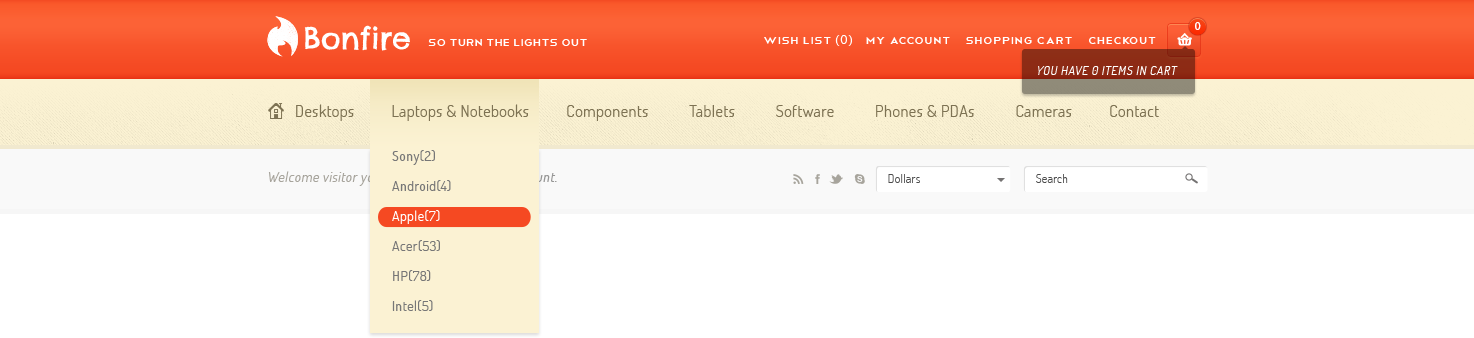
<style>
.page{position:relative;width:1474px;height:338px;background:#ffffff}
.page>*{position:absolute;margin:0}
.t1{font:30px "ChelseaMarket-Regular";color:#ffffff}
.t2{font:11px "MyriadPro-Regular";letter-spacing:0.03em;color:#ffffff}
.t3{font:14px "Telegrafico";color:#ffffff}
.t4{font:14px "Telegrafico";letter-spacing:0.03em;color:#ffffff}
.t5{font:11px "Geneva";letter-spacing:0.03em;color:#ffffff}
.t6{font:12px "TerminalDosis-Book";letter-spacing:0.05em;color:#ffffff;font-style:italic}
.t7{font:16px "TerminalDosis-Book";letter-spacing:0.03em;color:#7d7253}
.t8{font:14px/30px "TerminalDosis-Book";letter-spacing:0.03em;color:#777777}
.t9{font:14px/30px "TerminalDosis-Book";letter-spacing:0.03em;color:#ffffff}
.t10{font:14px "TerminalDosis-Book";letter-spacing:0.03em;font-style:italic}
.t11{font:12px "TerminalDosis-Light";letter-spacing:0.03em;color:#4c4c4c}
</style>
<div class="page">
<p class="t1" style="left:304px;top:25px;width:106px;height:26px">Bonfire</p>
<p class="t2" style="left:1195px;top:22px;width:6px;height:8px">0</p>
<p class="t3" style="left:428px;top:39px;width:159px;height:7px">so turn the lights out</p>
<p class="t4" style="left:764px;top:35px;width:392px;height:11px">Wish List <span class="t5">(0)    </span>My Account    Shopping Cart    Checkout</p>
<p class="t6" style="left:1038px;top:66px;width:140px;height:9px">YOU HAVE 0 ITEMS IN CART</p>
<p class="t7" style="left:296px;top:104px;width:863px;height:17px">Desktops          Laptops &amp; Notebooks          Components           Tablets           Software           Phones &amp; PDAs           Cameras          Contact</p>
<p class="t8" style="left:392px;top:150px;width:59px;height:161px">Sony(2)<br>Android(4)<br><span class="t9">Apple(7)<br></span>Acer(53)<br>HP(78)<br>Intel(5)</p>
<p class="t10" style="left:268px;top:171px;width:289px;height:15px">Welcome visitor you can login or create an account.</p>
<p class="t11" style="left:888px;top:174px;width:32px;height:9px">Dollars</p>
<p class="t11" style="left:1036px;top:174px;width:32px;height:9px">Search</p>
</div>
